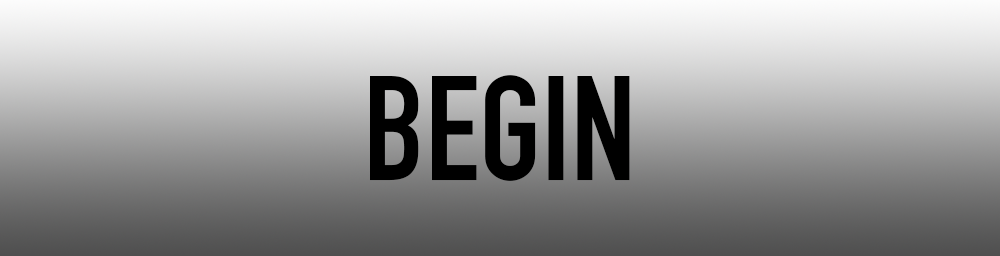
<style>
.page{position:relative;width:1000px;height:256px}
.page>*{position:absolute;margin:0}
.t1{font:145.8px "DINCondensed-Bold";color:#000000}
</style>
<div class="page">
<p class="t1" style="left:370px;top:75px;width:260px;height:106px">BEGIN</p>
</div>
